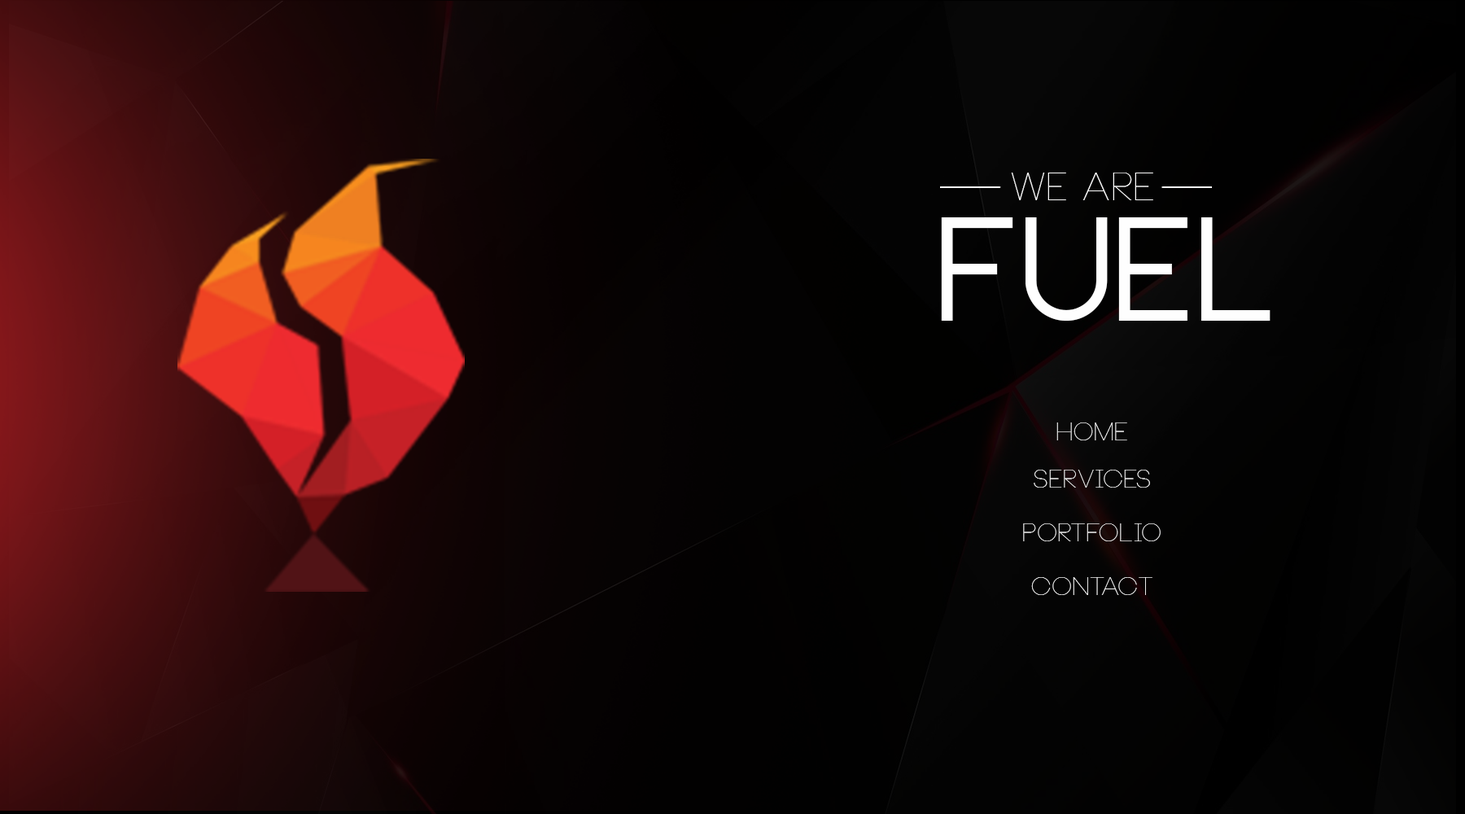
<style>
.page{position:relative;width:1465px;height:814px}
.page>*{position:absolute;margin:0}
.t1{font:39.1px "Neou-Thin";letter-spacing:0.01em;color:#fefefe}
.t2{font:144.4px "Neou-Bold";letter-spacing:0.01em;color:#fefefe}
.t3{font:25.5px "Neou-Thin";letter-spacing:0.01em;color:#ffffff}
</style>
<div class="page">
<p class="t1" style="left:1011px;top:173px;width:142px;height:27px">WE ARE</p>
<p class="t2" style="left:941px;top:217px;width:330px;height:104px">FUEL</p>
<p class="t3" style="left:1056px;top:422px;width:71px;height:18px">home</p>
<p class="t3" style="left:1034px;top:470px;width:116px;height:18px">services</p>
<p class="t3" style="left:1023px;top:523px;width:138px;height:18px">Portfolio</p>
<p class="t3" style="left:1031px;top:577px;width:122px;height:18px">contact</p>
</div>
